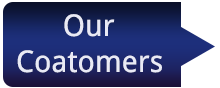
<style>
.page{position:relative;width:220px;height:88px}
.page>*{position:absolute;margin:0}
.t1{font:30px/36px "DroidSans";color:#e9eaf5}
</style>
<div class="page">
<p class="t1" style="left:17px;top:14px;width:145px;height:59px">Our<br>Coatomers</p>
</div>
